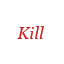
<style>
.page{position:relative;width:64px;height:64px;background:#ffffff}
.page>*{position:absolute;margin:0}
.t1{font:18px "Constantia-Italic";color:#ca2424}
</style>
<div class="page">
<p class="t1" style="left:17px;top:26px;width:27px;height:13px">Kill</p>
</div>
